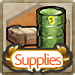
<style>
.page{position:relative;width:75px;height:75px}
.page>*{position:absolute;margin:0}
.t1{font:16px "AdobeClean-Regular";letter-spacing:-0.08em;color:#ff5a00}
</style>
<div class="page">
<p class="t1" style="left:14px;top:53px;width:48px;height:16px">Supplies</p>
</div>
